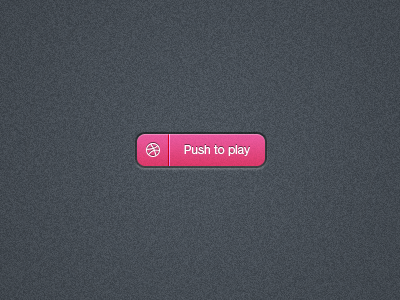
<style>
.page{position:relative;width:400px;height:300px}
.page>*{position:absolute;margin:0}
.t1{font:12px "HelveticaNeueLTStd-Roman";color:#ffffff}
</style>
<div class="page">
<p class="t1" style="left:184px;top:145px;width:66px;height:11px">Push to play</p>
</div>
